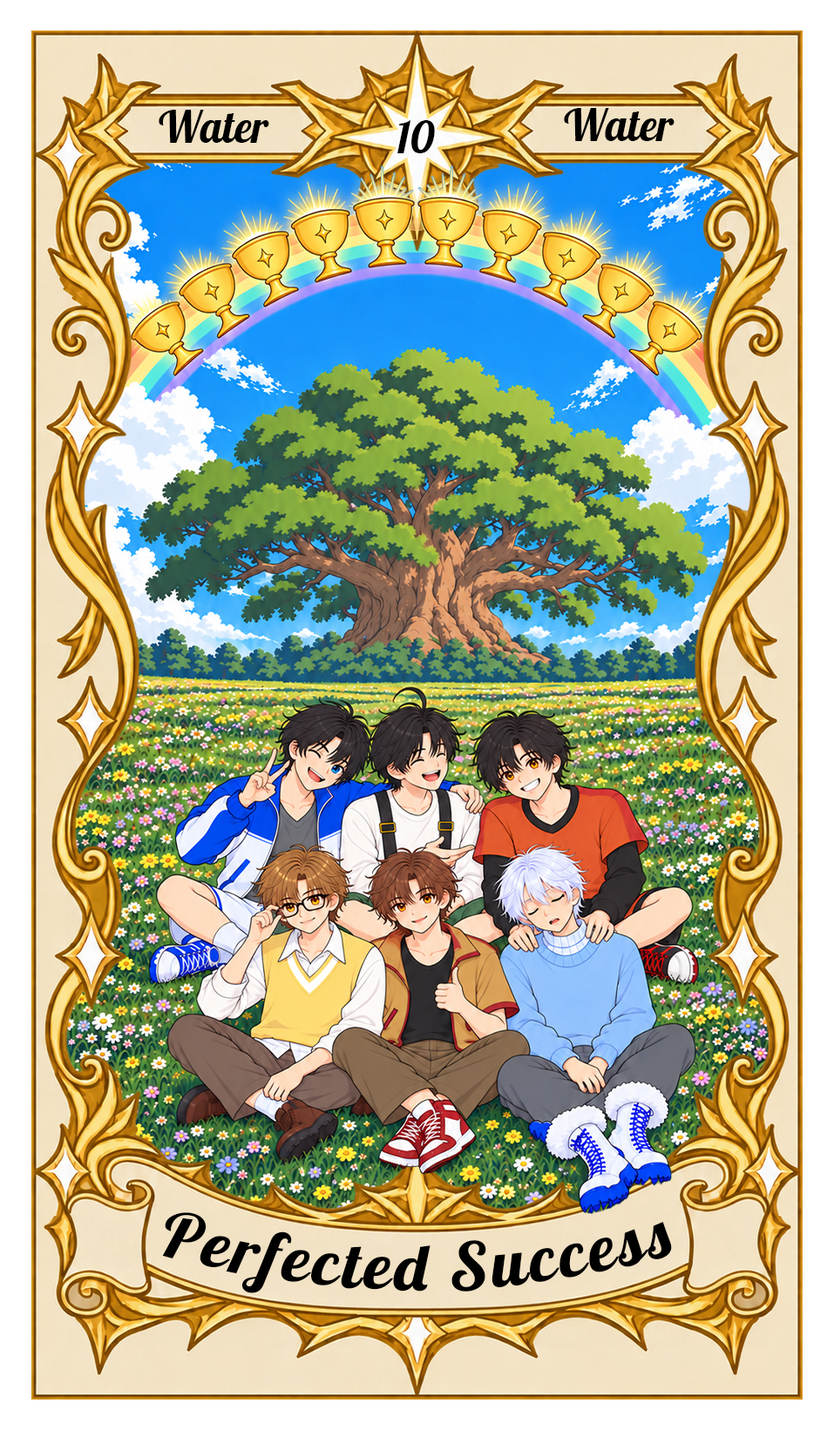
<style>
.page{position:relative;width:834px;height:1430px}
.page>*{position:absolute;margin:0}
.t1{font:43.6px "Lobster-Regular";color:#000000}
.t2{font:65.3px "Lobster-Regular";letter-spacing:0.05em;color:#000000}
</style>
<div class="page">
<p class="t1" style="left:159px;top:110px;width:110px;height:33px">Water</p>
<p class="t1" style="left:564px;top:108px;width:110px;height:33px">Water</p>
<p class="t1" style="left:397px;top:120px;width:38px;height:33px">10</p>
<p class="t2" style="left:162px;top:1213px;width:510px;height:81px">Perfected Success</p>
</div>
